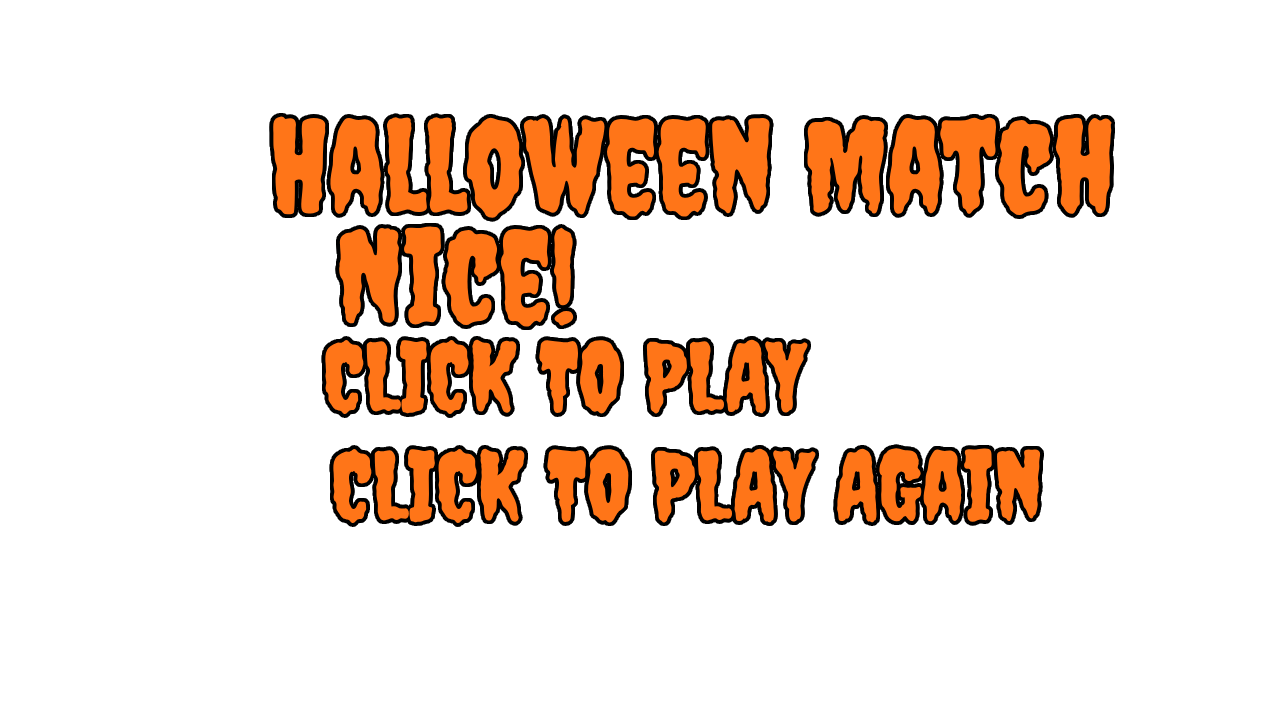
<style>
.page{position:relative;width:1280px;height:720px;background:#ffffff}
.page>*{position:absolute;margin:0}
.t1{font:128px "Creepster-Regular";color:#ff7518}
.t2{font:96px "Creepster-Regular";color:#ff7518}
</style>
<div class="page">
<p class="t1" style="left:273px;top:116px;width:839px;height:102px">Halloween Match</p>
<p class="t1" style="left:339px;top:226px;width:236px;height:101px">Nice!</p>
<p class="t2" style="left:325px;top:338px;width:484px;height:78px">CLICK TO PLAY</p>
<p class="t2" style="left:333px;top:447px;width:708px;height:78px">CLICK TO PLAY AGain</p>
</div>
